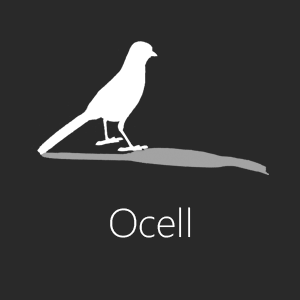
<style>
.page{position:relative;width:300px;height:300px;background:#292929}
.page>*{position:absolute;margin:0}
.t1{font:40px "SegoeWP-Light";color:#ffffff}
</style>
<div class="page">
<p class="t1" style="left:110px;top:207px;width:81px;height:31px">Ocell</p>
</div>
